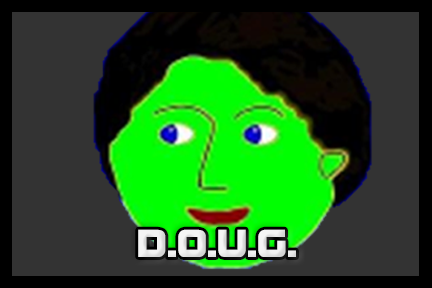
<style>
.page{position:relative;width:432px;height:288px;background:#333333}
.page>*{position:absolute;margin:0}
.t1{font:41.7px "BolsterBold";color:#f3f3f3}
</style>
<div class="page">
<p class="t1" style="left:138px;top:229px;width:158px;height:28px">D.O.U.G.</p>
</div>
